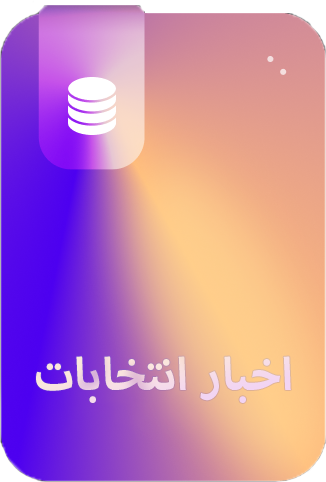
<style>
.page{position:relative;width:326px;height:482px}
.page>*{position:absolute;margin:0}
.t1{font:64px "MyriadArabic-Bold";color:#f4dae4}
</style>
<div class="page">
<p class="t1" style="left:36px;top:356px;width:255px;height:47px">اخبار انتخابات</p>
</div>
